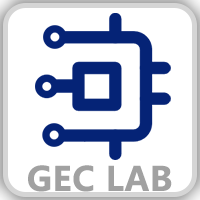
<style>
.page{position:relative;width:200px;height:200px;background:#ffffff}
.page>*{position:absolute;margin:0}
.t1{font:56px "MicrosoftYaHei-Bold";color:#a1a1a1;font-weight:bold}
</style>
<div class="page">
<p class="t1" style="left:28px;top:165px;width:144px;height:27px">GEC LAB</p>
</div>
